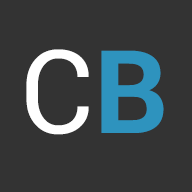
<style>
.page{position:relative;width:192px;height:192px;background:#333333}
.page>*{position:absolute;margin:0}
.t1{font:115.8px "Roboto-Regular";color:#ffffff}
.t2{font:115.8px "Roboto-Bold";color:#2e93be}
</style>
<div class="page">
<p class="t1" style="left:26px;top:49px;width:138px;height:86px">C<span class="t2">B</span></p>
</div>
